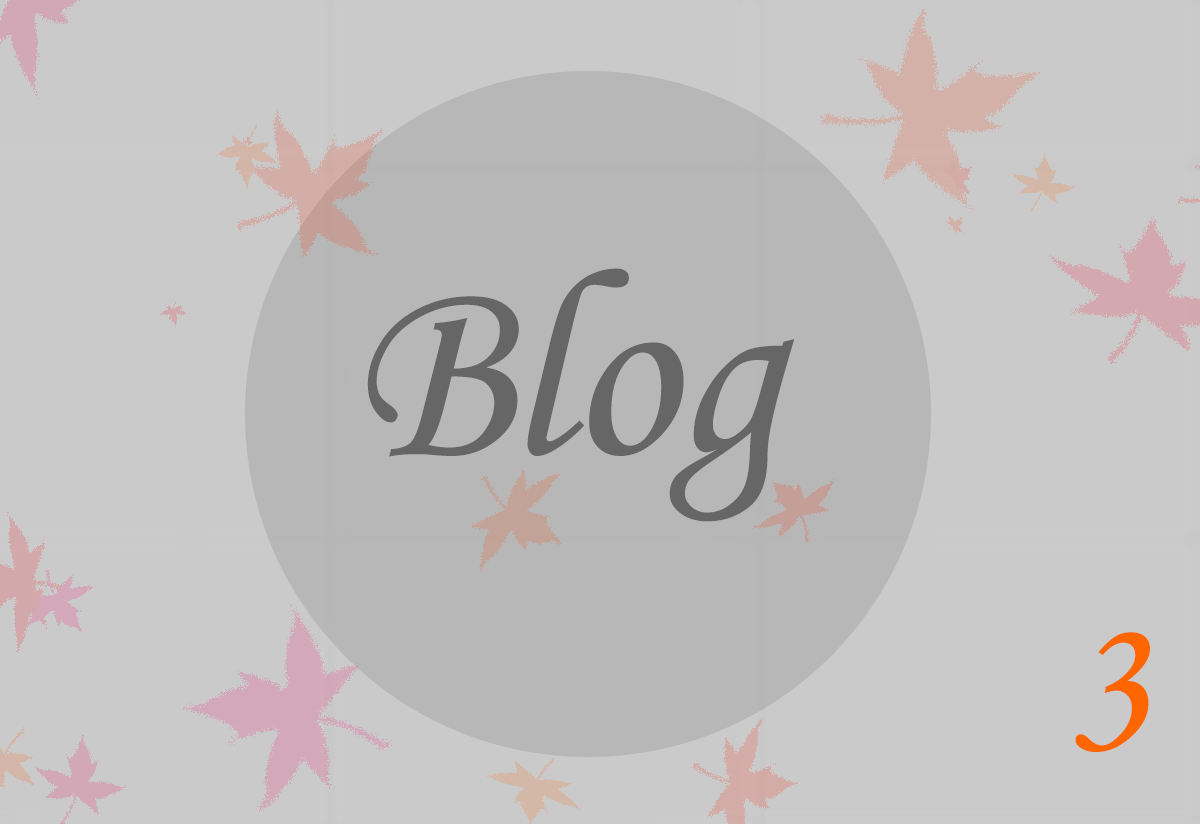
<style>
.page{position:relative;width:1200px;height:824px;background:#cacaca}
.page>*{position:absolute;margin:0}
.t1{font:266.7px "STLiti";color:#666666}
.t2{font:200px "STLiti";color:#ff6600}
</style>
<div class="page">
<p class="t1" style="left:367px;top:268px;width:428px;height:254px">Blog</p>
<p class="t2" style="left:1075px;top:632px;width:75px;height:120px">3</p>
</div>
